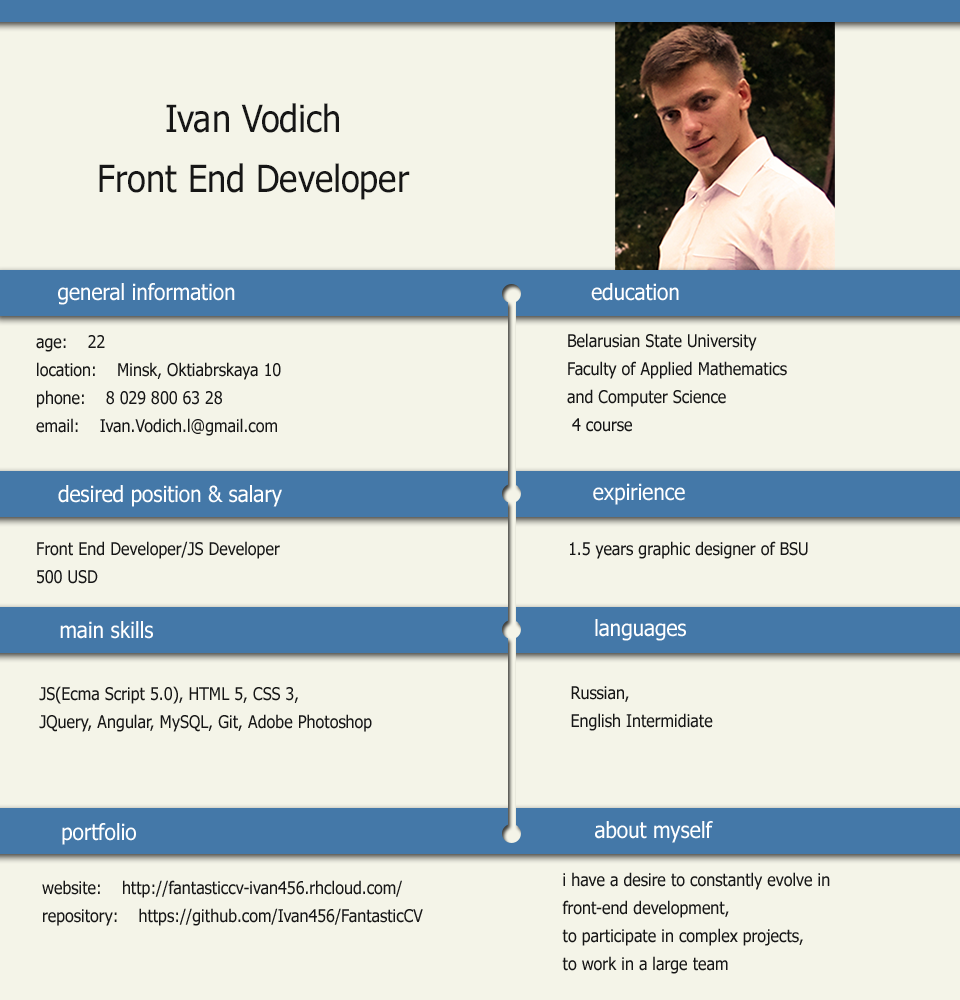
<style>
.page{position:relative;width:960px;height:1000px;background:#f4f4e8}
.page>*{position:absolute;margin:0}
.t1{font:37.5px/60px "Tahoma";color:#161616;scale:0.92 1}
.t2{font:22.5px "Tahoma";color:#ffffff;scale:0.92 1}
.t3{font:17.5px/14px "Tahoma";color:#161616;scale:0.92 1}
.t4{font:17.5px "Tahoma";color:#161616;scale:0.92 1}
</style>
<div class="page">
<p class="t1" style="left:99px;top:103px;width:311px;height:97px;text-align:center">Ivan Vodich<br>Front End Developer</p>
<p class="t2" style="left:58px;top:283px;width:177px;height:22px">general information</p>
<p class="t2" style="left:591px;top:283px;width:88px;height:18px">education</p>
<p class="t3" style="left:36px;top:335px;width:245px;height:101px">age:    22<br><br>location:    Minsk, Oktiabrskaya 10<br><br>phone:    8 029 800 63 28<br><br>email:    Ivan.Vodich.l@gmail.com</p>
<p class="t3" style="left:567px;top:333px;width:220px;height:99px">Belarusian State University<br><br>Faculty of Applied Mathematics <br><br>and Computer Science<br><br> 4 course</p>
<p class="t2" style="left:58px;top:485px;width:224px;height:22px">desired position &amp; salary</p>
<p class="t2" style="left:593px;top:483px;width:92px;height:22px">expirience</p>
<p class="t3" style="left:37px;top:541px;width:243px;height:43px">Front End Developer/JS Developer<br><br>500 USD</p>
<p class="t4" style="left:570px;top:541px;width:238px;height:18px">1.5 years graphic designer of BSU</p>
<p class="t2" style="left:60px;top:621px;width:93px;height:18px">main skills</p>
<p class="t2" style="left:595px;top:619px;width:91px;height:22px">languages</p>
<p class="t3" style="left:39px;top:686px;width:333px;height:46px">JS(Ecma Script 5.0), HTML 5, CSS 3,<br><br>JQuery, Angular, MySQL, Git, Adobe Photoshop</p>
<p class="t3" style="left:571px;top:686px;width:142px;height:45px">Russian, <br><br>English Intermidiate</p>
<p class="t2" style="left:595px;top:821px;width:118px;height:22px">about myself</p>
<p class="t2" style="left:62px;top:823px;width:74px;height:22px">portfolio</p>
<p class="t3" style="left:42px;top:880px;width:381px;height:46px">website:    http://fantasticcv-ivan456.rhcloud.com/<br><br>repository:    https://github.com/Ivan456/FantasticCV</p>
<p class="t3" style="left:562px;top:872px;width:268px;height:102px">i have a desire to constantly evolve in<br> <br>front-end development, <br><br>to participate in complex projects, <br><br>to work in a large team</p>
</div>
